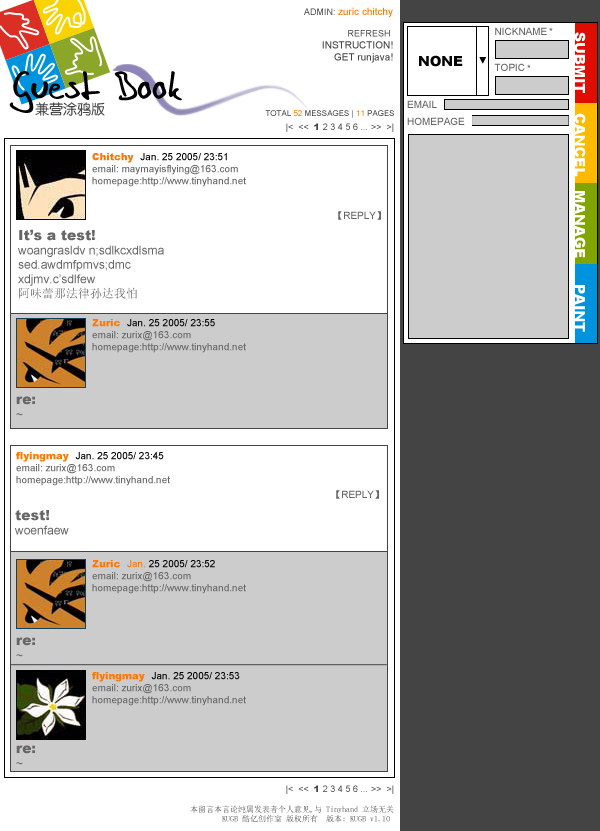
<style>
.page{position:relative;width:600px;height:831px;background:#ffffff}
.page>*{position:absolute;margin:0}
.t1{font:10px "ArialMT";color:#444444}
.t2{font:9px "ArialMT";color:#444444}
.t3{font:10px "ArialMT";color:#ff7700}
.t4{font:8px "ArialMT";color:#444444}
.t5{font:8px "ArialMT";color:#ff7800}
.t6{font:8px "ArialMT";color:#ff7e00}
.t7{font:9px "Arial-Black";color:#444444}
.t8{font:10px "ArialMT";color:#666666}
.t9{font:10px "Arial-Black";color:#ff7700}
.t10{font:10px "ArialMT";color:#000000}
.t11{font:10px "SimSun";color:#666666}
.t12{font:12px "ArialMT";color:#666666}
.t13{font:14px "Arial-Black";color:#666666}
.t14{font:12px "SimSun";color:#666666}
.t15{font:8px "SimSun"}
</style>
<div class="page">
<p class="t1" style="left:304px;top:7px;width:89px;height:56px;text-align:right"><span class="t2">ADMIN: </span><span class="t3">zuric chitchy<br><br></span><span class="t2">REFRESH <br></span>INSTRUCTION!<br>GET runjava!</p>
<p class="t4" style="left:265px;top:110px;width:129px;height:8px">TOTAL <span class="t5">52</span> MESSAGES | <span class="t6">11 </span>PAGES</p>
<p class="t2" style="left:286px;top:123px;width:108px;height:9px">|&lt;  &lt;&lt;  <span class="t7">1 </span>2 3 4 5 6 ... &gt;&gt;  &gt;|</p>
<p class="t8" style="left:92px;top:153px;width:154px;height:34px"><span class="t9">Chitchy  </span><span class="t10">Jan. 25 2005/ 23:51</span><br>email: maymayisflying@163.com<br>homepage:http://www.tinyhand.net</p>
<p class="t8" style="left:338px;top:211px;width:43px;height:9px"><span class="t11">【</span>REPLY<span class="t11">】</span></p>
<p class="t12" style="left:18px;top:229px;width:146px;height:70px"><span class="t13">It’s a test!<br></span>woangrasldv n;sdlkcxdlsma<br>sed.awdmfpmvs;dmc<br>xdjmv.c’sdlfew<br><span class="t14">阿味蕾那法律孙达我怕</span></p>
<p class="t8" style="left:92px;top:319px;width:154px;height:34px"><span class="t9">Zuric  </span><span class="t10">Jan. 25 2005/ 23:55</span><br>email: zurix@163.com<br>homepage:http://www.tinyhand.net</p>
<p class="t13" style="left:16px;top:396px;width:19px;height:20px">re: <br><span class="t12">~</span></p>
<p class="t8" style="left:16px;top:452px;width:154px;height:34px"><span class="t9">flyingmay  </span><span class="t10">Jan. 25 2005/ 23:45</span><br>email: zurix@163.com<br>homepage:http://www.tinyhand.net</p>
<p class="t8" style="left:336px;top:490px;width:43px;height:9px"><span class="t11">【</span>REPLY<span class="t11">】</span></p>
<p class="t12" style="left:15px;top:510px;width:54px;height:25px"><span class="t13">test!<br></span>woenfaew</p>
<p class="t8" style="left:92px;top:560px;width:154px;height:34px"><span class="t9">Zuric  </span><span class="t3">Jan. </span><span class="t10">25 2005/ 23:52</span><br>email: zurix@163.com<br>homepage:http://www.tinyhand.net</p>
<p class="t13" style="left:16px;top:637px;width:19px;height:20px">re: <br><span class="t12">~</span></p>
<p class="t8" style="left:92px;top:672px;width:154px;height:34px"><span class="t9">flyingmay  </span><span class="t10">Jan. 25 2005/ 23:53</span><br>email: zurix@163.com<br>homepage:http://www.tinyhand.net</p>
<p class="t13" style="left:16px;top:745px;width:19px;height:20px">re: <br><span class="t12">~</span></p>
<p class="t2" style="left:286px;top:785px;width:108px;height:9px">|&lt;  &lt;&lt;  <span class="t7">1 </span>2 3 4 5 6 ... &gt;&gt;  &gt;|</p>
<p class="t15" style="left:190px;top:805px;width:204px;height:18px;text-align:right">本留言本言论纯属发表者个人意见,与 Tinyhand 立场无关<br>       KUGB 酷亿创作室 版权所有  版本: KUGB v1.10</p>
</div>
